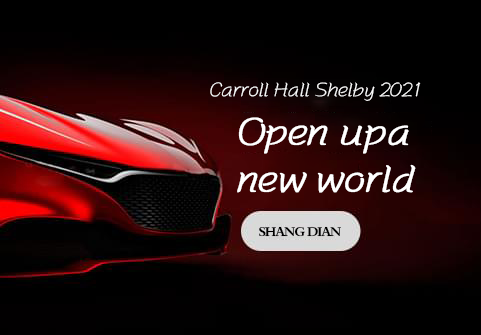
<style>
.page{position:relative;width:481px;height:335px;background:#000000}
.page>*{position:absolute;margin:0}
.t1{font:20px "JIMOJW";letter-spacing:0.005em;color:#ffffff}
.t2{font:39px "JIMOJW";letter-spacing:0.005em;color:#ffffff;font-weight:bold}
.t3{font:14px "²ÝÌ´Õ«Ã«Ôó¶«×ÖÌå";letter-spacing:-0.095em;color:#000000}
</style>
<div class="page">
<p class="t1" style="left:210px;top:82px;width:211px;height:19px">Carroll Hall Shelby 2021</p>
<p class="t2" style="left:237px;top:117px;width:179px;height:76px">Open upa <br>new world</p>
<p class="t3" style="left:259px;top:226px;width:82px;height:11px">SHANG DIAN</p>
</div>
